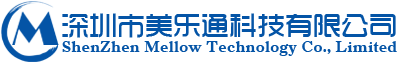
<style>
.page{position:relative;width:400px;height:63px;background:#ffffff}
.page>*{position:absolute;margin:0}
.t1{font:28px "TRENDS";color:#0454a6}
.t2{font:16px "Dutch766BT-BoldA";letter-spacing:0.017em;color:#0454a6}
</style>
<div class="page">
<p class="t1" style="left:62px;top:13px;width:334px;height:25px">深圳市美乐通科技有限公司</p>
<p class="t2" style="left:62px;top:41px;width:335px;height:15px">ShenZhen Mellow Technology Co., Limited</p>
</div>
